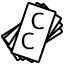
<style>
.page{position:relative;width:64px;height:64px;background:#ffffff}
.page>*{position:absolute;margin:0}
.t1{font:31px "VL-PGothic-Regular";color:#000000}
</style>
<div class="page">
<p class="t1" style="left:31px;top:12px;width:13px;height:18px">c</p>
<p class="t1" style="left:21px;top:32px;width:13px;height:18px">c</p>
</div>
